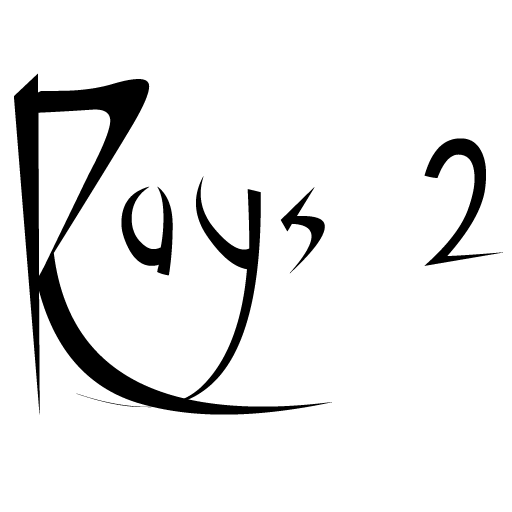
<style>
.page{position:relative;width:512px;height:512px;background:#ffffff}
.page>*{position:absolute;margin:0}
.t1{font:350px "Vampiress";color:#000000}
</style>
<div class="page">
<p class="t1" style="left:14px;top:73px;width:489px;height:342px">Rays 2</p>
</div>
